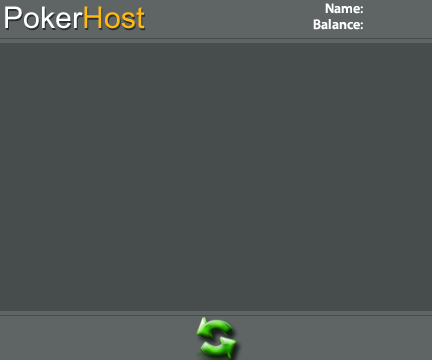
<style>
.page{position:relative;width:432px;height:360px;background:#474d4d}
.page>*{position:absolute;margin:0}
.t1{font:30px "ArialUnicodeMS";color:#ffffff}
.t2{font:30px "ArialUnicodeMS";color:#ffb90f}
.t3{font:14px "MyriadPro-Semibold";color:#ffffff}
</style>
<div class="page">
<p class="t1" style="left:5px;top:6px;width:140px;height:23px">Poker<span class="t2">Host</span></p>
<p class="t3" style="left:325px;top:3px;width:38px;height:11px">Name:</p>
<p class="t3" style="left:313px;top:19px;width:50px;height:11px">Balance:</p>
</div>
